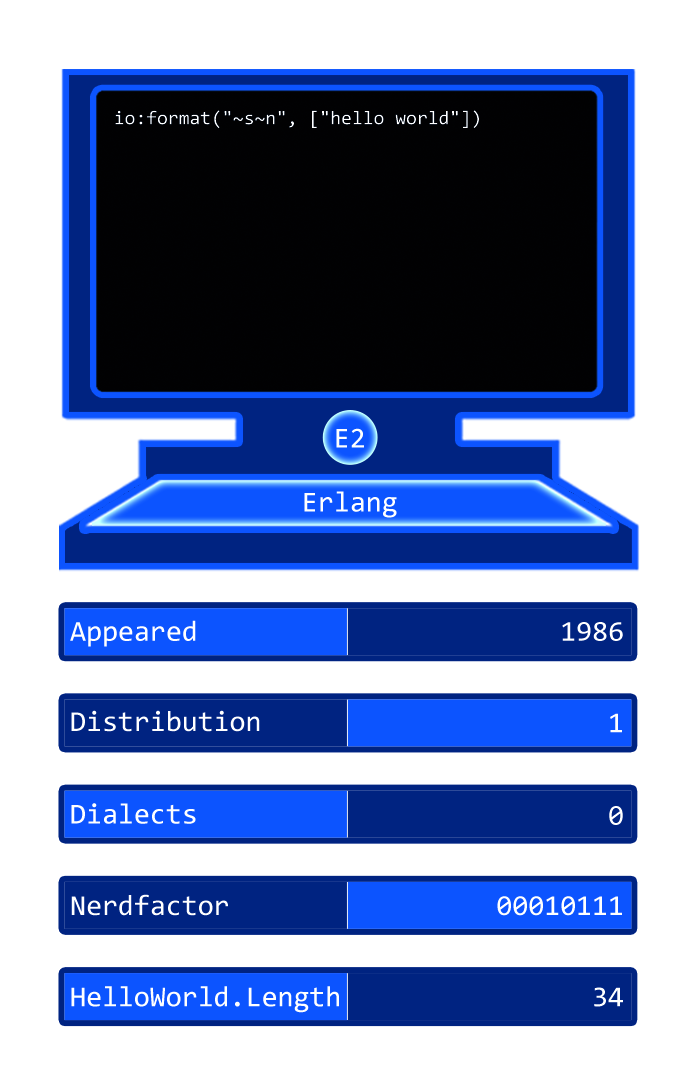
<style>
.page{position:relative;width:697px;height:1087px;background:#ffffff}
.page>*{position:absolute;margin:0}
.t1{font:19.3px "Consolas";color:#ffffff}
.t2{font:29px "Consolas";color:#ffffff}
</style>
<div class="page">
<p class="t1" style="left:115px;top:110px;width:364px;height:19px">io:format("~s~n", ["hello world"])</p>
<p class="t2" style="left:336px;top:428px;width:28px;height:20px">E2</p>
<p class="t2" style="left:304px;top:491px;width:93px;height:27px">Erlang</p>
<p class="t2" style="left:70px;top:620px;width:126px;height:27px">Appeared</p>
<p class="t2" style="left:562px;top:622px;width:61px;height:19px">1986</p>
<p class="t2" style="left:71px;top:710px;width:189px;height:22px">Distribution</p>
<p class="t2" style="left:610px;top:713px;width:12px;height:20px">1</p>
<p class="t2" style="left:71px;top:803px;width:125px;height:21px">Dialects</p>
<p class="t2" style="left:609px;top:806px;width:14px;height:19px">0</p>
<p class="t2" style="left:71px;top:894px;width:157px;height:22px">Nerdfactor</p>
<p class="t2" style="left:497px;top:896px;width:125px;height:20px">00010111</p>
<p class="t2" style="left:71px;top:986px;width:268px;height:27px">HelloWorld.Length</p>
<p class="t2" style="left:594px;top:987px;width:29px;height:20px">34</p>
</div>
